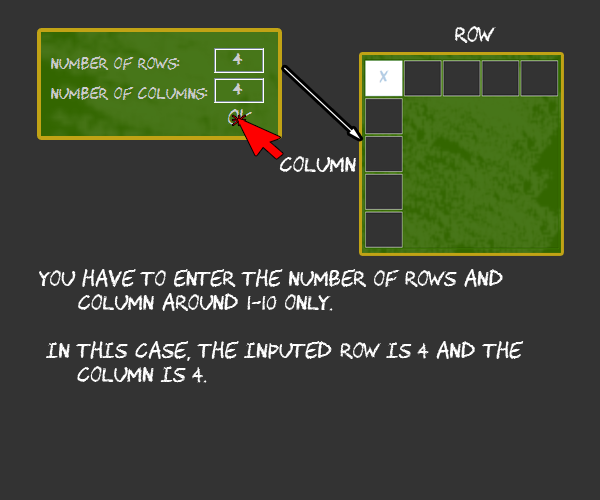
<style>
.page{position:relative;width:600px;height:500px;background:#333333}
.page>*{position:absolute;margin:0}
.t1{font:20px "CHAWP";color:#ffffff}
</style>
<div class="page">
<p class="t1" style="left:455px;top:26px;width:41px;height:17px">row</p>
<p class="t1" style="left:279px;top:156px;width:77px;height:16px">column</p>
<p class="t1" style="left:39px;top:269px;width:464px;height:42px">you have to enter the number of rows and<br>     column around 1-10 only.</p>
<p class="t1" style="left:46px;top:341px;width:478px;height:42px">in this case, the inputed row is 4 and the <br>    column is 4.</p>
</div>
